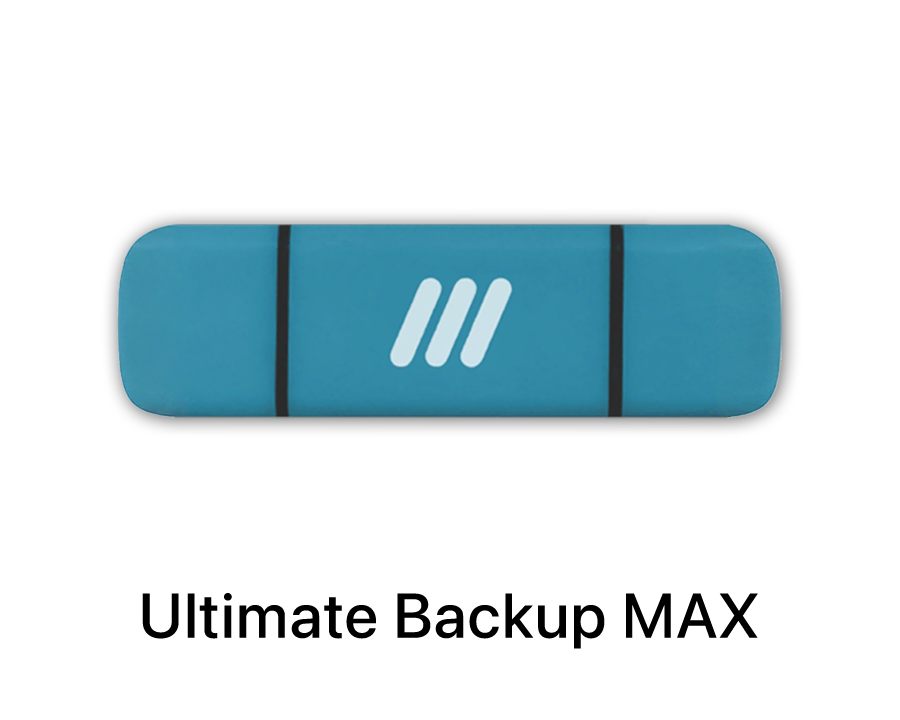
<style>
.page{position:relative;width:900px;height:720px;background:#ffffff}
.page>*{position:absolute;margin:0}
.t1{font:62.7px "SFPro-Medium";letter-spacing:0.025em;color:#000000}
</style>
<div class="page">
<p class="t1" style="left:142px;top:593px;width:616px;height:56px">Ultimate Backup MAX</p>
</div>
